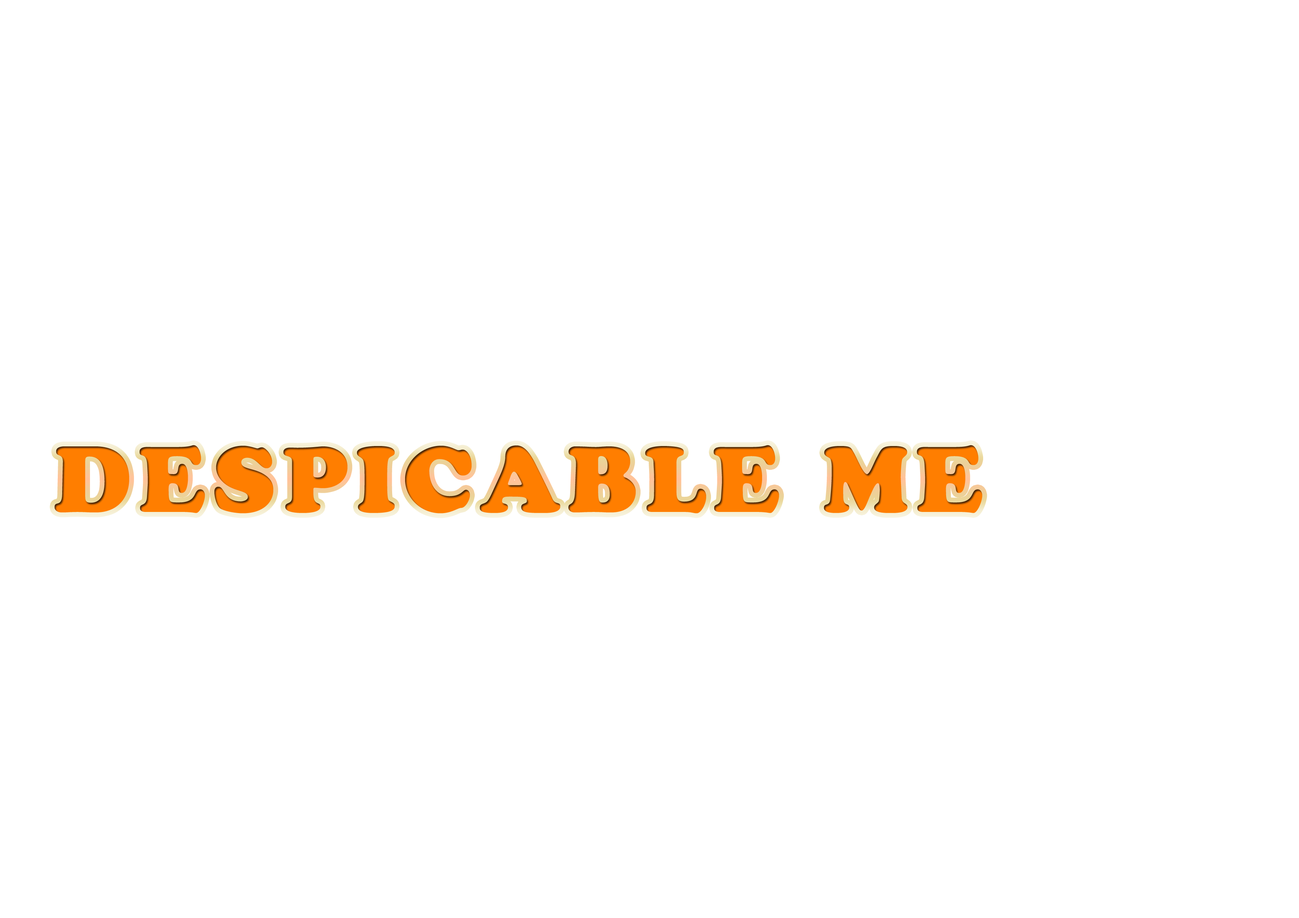
<style>
.page{position:relative;width:1299px;height:918px;background:#ffffff}
.page>*{position:absolute;margin:0}
.t1{font:92.6px "CooperBlackStd";letter-spacing:0.075em;color:#ff7e00}
</style>
<div class="page">
<p class="t1" style="left:54px;top:445px;width:928px;height:68px">DESPICABLE ME</p>
</div>
